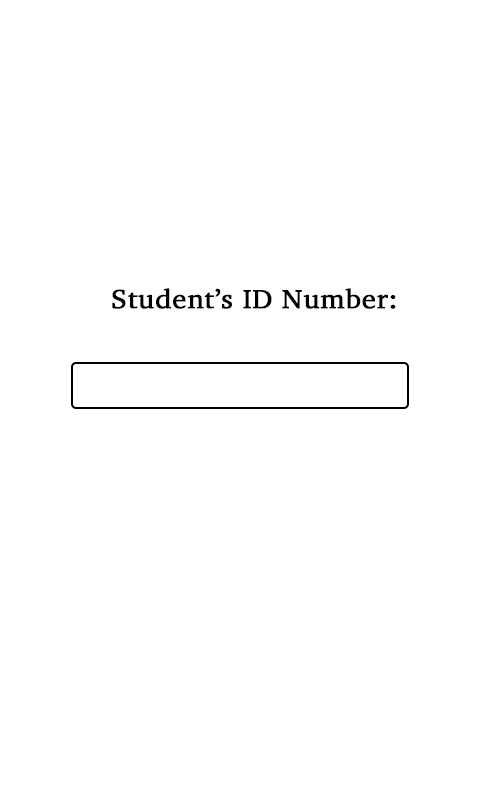
<style>
.page{position:relative;width:480px;height:800px;background:#ffffff}
.page>*{position:absolute;margin:0}
.t1{font:27px "Charter";color:#000000;font-weight:bold;scale:1.07 1}
</style>
<div class="page">
<p class="t1" style="left:112px;top:288px;width:284px;height:21px">Student’s ID Number:</p>
</div>
